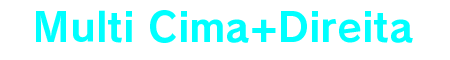
<style>
.page{position:relative;width:450px;height:60px;background:#ffffff}
.page>*{position:absolute;margin:0}
.t1{font:40px "RodinPro-B";color:#00ffff}
</style>
<div class="page">
<p class="t1" style="left:36px;top:10px;width:377px;height:33px">Multi Cima+Direita</p>
</div>
